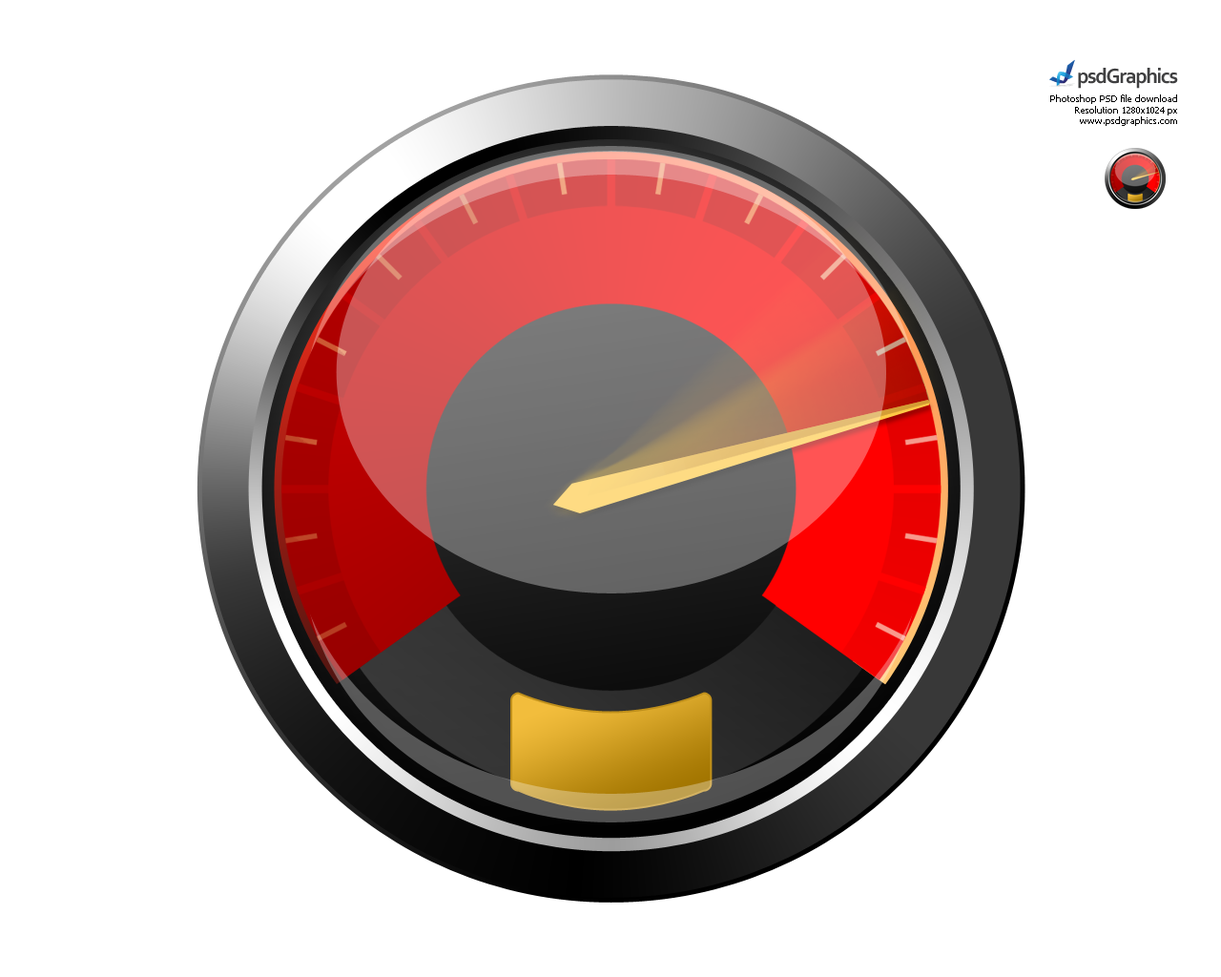
<style>
.page{position:relative;width:1221px;height:977px;background:#ffffff}
.page>*{position:absolute;margin:0}
.t1{font:9.3px "Tahoma";color:#000000}
</style>
<div class="page">
<p class="t1" style="left:1050px;top:94px;width:127px;height:32px;text-align:right">Photoshop PSD file download<br>Resolution 1280x1024 px<br>www.psdgraphics.com</p>
</div>
